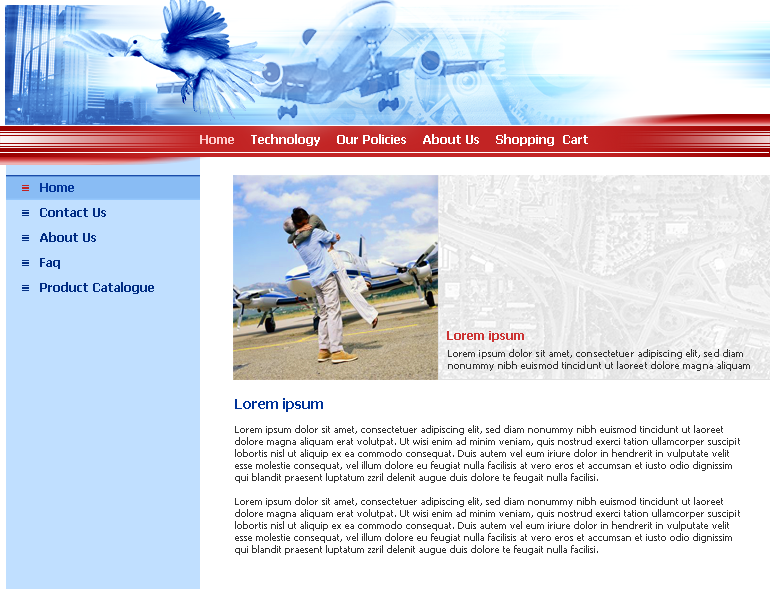
<style>
.page{position:relative;width:770px;height:595px;background:#ffffff}
.page>*{position:absolute;margin:0}
.t1{font:12px "Tahoma-Bold";color:#ffffff}
.t2{font:12px "Tahoma-Bold";color:#ffcccc}
.t3{font:12px/25px "Tahoma-Bold";color:#002c83}
.t4{font:12px/25px "Tahoma-Bold";color:#003399}
.t5{font:12px "Tahoma-Bold";color:#cc3333}
.t6{font:10px "Tahoma";color:#333333}
.t7{font:14px/20px "Tahoma-Bold";color:#003399}
</style>
<div class="page">
<p class="t1" style="left:200px;top:134px;width:388px;height:12px"><span class="t2">Home</span>    Technology    Our Policies    About Us    Shopping  Cart</p>
<p class="t3" style="left:40px;top:183px;width:114px;height:111px"><span class="t4">Home<br></span>Contact Us<br>About Us<br>Faq<br>Product Catalogue</p>
<p class="t5" style="left:447px;top:331px;width:77px;height:11px">Lorem ipsum</p>
<p class="t6" style="left:448px;top:349px;width:302px;height:22px">Lorem ipsum dolor sit amet, consectetuer adipiscing elit, sed diam nonummy nibh euismod tincidunt ut laoreet dolore magna aliquam erat volut</p>
<p class="t6" style="left:235px;top:398px;width:505px;height:157px"><span class="t7">Lorem ipsum<br><br></span>Lorem ipsum dolor sit amet, consectetuer adipiscing elit, sed diam nonummy nibh euismod tincidunt ut laoreet dolore magna aliquam erat volutpat. Ut wisi enim ad minim veniam, quis nostrud exerci tation ullamcorper suscipit lobortis nisl ut aliquip ex ea commodo consequat. Duis autem vel eum iriure dolor in hendrerit in vulputate velit esse molestie consequat, vel illum dolore eu feugiat nulla facilisis at vero eros et accumsan et iusto odio dignissim qui blandit praesent luptatum zzril delenit augue duis dolore te feugait nulla facilisi.<br><br>Lorem ipsum dolor sit amet, consectetuer adipiscing elit, sed diam nonummy nibh euismod tincidunt ut laoreet dolore magna aliquam erat volutpat. Ut wisi enim ad minim veniam, quis nostrud exerci tation ullamcorper suscipit lobortis nisl ut aliquip ex ea commodo consequat. Duis autem vel eum iriure dolor in hendrerit in vulputate velit esse molestie consequat, vel illum dolore eu feugiat nulla facilisis at vero eros et accumsan et iusto odio dignissim qui blandit praesent luptatum zzril delenit augue duis dolore te feugait nulla facilisi.</p>
</div>
